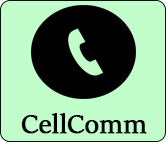
<style>
.page{position:relative;width:166px;height:142px;background:#c2fecb}
.page>*{position:absolute;margin:0}
.t1{font:30px "SitkaBanner";color:#000000;font-weight:bold}
</style>
<div class="page">
<p class="t1" style="left:21px;top:113px;width:126px;height:21px">CellComm</p>
</div>
